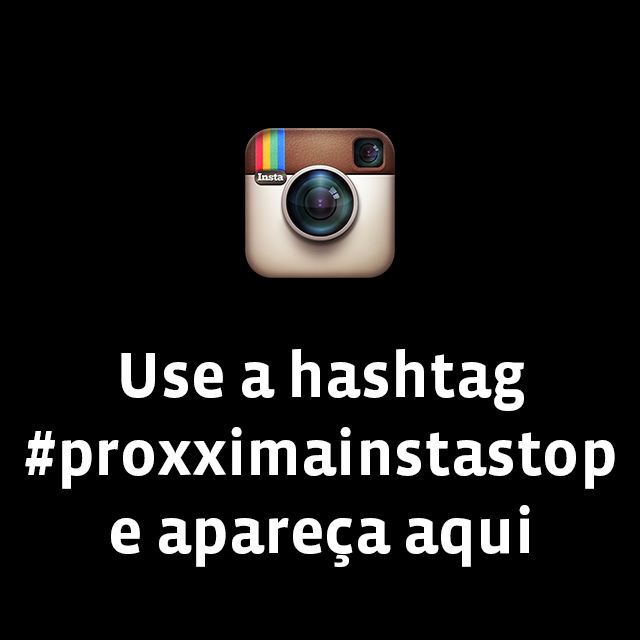
<style>
.page{position:relative;width:640px;height:640px;background:#000000}
.page>*{position:absolute;margin:0}
.t1{font:65px "VistaSansOT-Bold";color:#ffffff}
</style>
<div class="page">
<p class="t1" style="left:25px;top:349px;width:590px;height:218px;text-align:center">Use a hashtag<br>#proxximainstastop<br>e apareça aqui</p>
</div>
